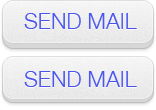
<style>
.page{position:relative;width:156px;height:110px}
.page>*{position:absolute;margin:0}
.t1{font:22px "HelveticaNeue-Light"}
.t2{font:22px "HelveticaNeue-Light";color:#4a56ee}
</style>
<div class="page">
<p class="t1" style="left:24px;top:14px;width:113px;height:16px">SEND MAIL</p>
<p class="t2" style="left:24px;top:13px;width:113px;height:16px">SEND MAIL</p>
<p class="t1" style="left:24px;top:72px;width:113px;height:16px">SEND MAIL</p>
<p class="t2" style="left:24px;top:71px;width:113px;height:16px">SEND MAIL</p>
</div>
